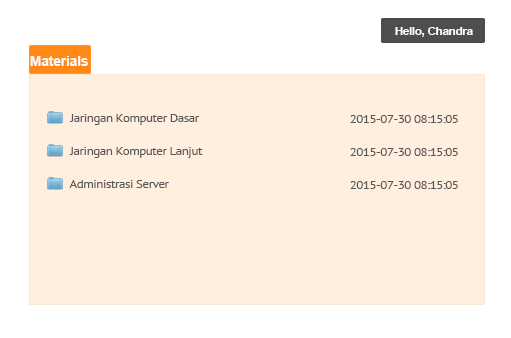
<style>
.page{position:relative;width:511px;height:338px;background:#ffefdf}
.page>*{position:absolute;margin:0}
.t1{font:11px "Arial-BoldMT";letter-spacing:-0.025em;color:#fdfafa;scale:1.06 1}
.t2{font:13.5px "Arial-BoldMT";letter-spacing:-0.025em;color:#fdfdfc;scale:1.06 1}
.t3{font:12px "PTSans-Regular";letter-spacing:-0.025em;color:#585858;scale:1.06 1}
</style>
<div class="page">
<p class="t1" style="left:395px;top:27px;width:78px;height:10px">Hello, Chandra</p>
<p class="t2" style="left:30px;top:56px;width:58px;height:10px">Materials</p>
<p class="t3" style="left:69px;top:114px;width:131px;height:11px">Jaringan Komputer Dasar</p>
<p class="t3" style="left:350px;top:115px;width:108px;height:8px">2015-07-30 08:15:05</p>
<p class="t3" style="left:69px;top:147px;width:134px;height:11px">Jaringan Komputer Lanjut</p>
<p class="t3" style="left:350px;top:148px;width:108px;height:8px">2015-07-30 08:15:05</p>
<p class="t3" style="left:69px;top:180px;width:100px;height:8px">Administrasi Server</p>
<p class="t3" style="left:350px;top:181px;width:108px;height:8px">2015-07-30 08:15:05</p>
</div>
